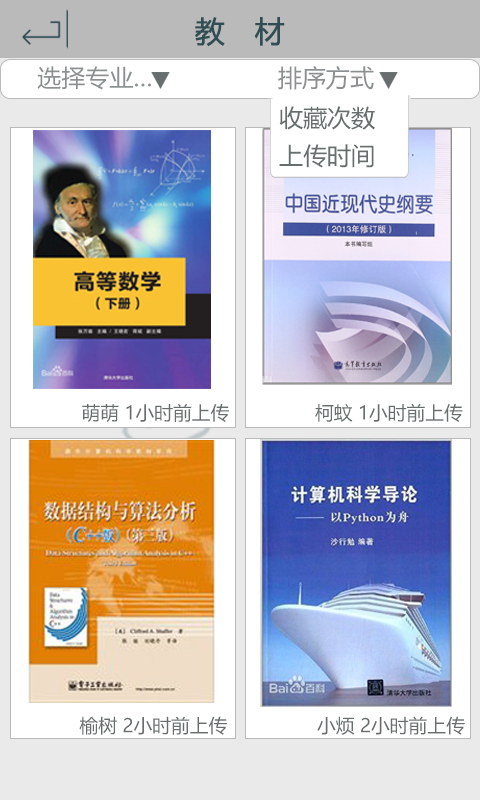
<style>
.page{position:relative;width:480px;height:800px;background:#ffffff}
.page>*{position:absolute;margin:0}
.t1{font:30px "MicrosoftYaHei";color:#304d54;font-weight:bold}
.t2{font:24px "MicrosoftYaHei";color:#8c9090}
.t3{font:24px "MicrosoftYaHei";color:#686e6e}
.t4{font:18.8px "MicrosoftYaHei";color:#686e6e}
</style>
<div class="page">
<p class="t1" style="left:195px;top:17px;width:90px;height:30px">教   材</p>
<p class="t2" style="left:37px;top:66px;width:114px;height:24px">选择专业…</p>
<p class="t2" style="left:278px;top:66px;width:96px;height:24px">排序方式</p>
<p class="t3" style="left:279px;top:106px;width:96px;height:24px">收藏次数</p>
<p class="t3" style="left:279px;top:144px;width:95px;height:24px">上传时间</p>
<p class="t4" style="left:82px;top:403px;width:147px;height:19px">萌萌 1小时前上传</p>
<p class="t4" style="left:315px;top:403px;width:148px;height:19px">柯蚊 1小时前上传</p>
<p class="t4" style="left:79px;top:716px;width:148px;height:19px">榆树 2小时前上传</p>
<p class="t4" style="left:317px;top:716px;width:148px;height:19px">小烦 2小时前上传</p>
</div>
